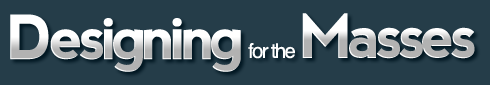
<style>
.page{position:relative;width:490px;height:85px;background:#253d49}
.page>*{position:absolute;margin:0}
.t1{font:60.7px "nevis-Bold";letter-spacing:-0.08em}
.t2{font:20.2px "Helvetica";letter-spacing:-0.08em;color:#ffffff}
</style>
<div class="page">
<p class="t1" style="left:10px;top:14px;width:231px;height:58px">Designing</p>
<p class="t1" style="left:302px;top:13px;width:173px;height:46px">Masses</p>
<p class="t2" style="left:248px;top:43px;width:47px;height:16px">for the</p>
</div>
